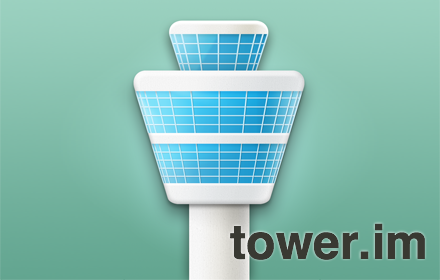
<style>
.page{position:relative;width:440px;height:280px}
.page>*{position:absolute;margin:0}
.t1{font:48px "Helvetica-Bold";color:#393932}
</style>
<div class="page">
<p class="t1" style="left:230px;top:223px;width:195px;height:37px">tower.im</p>
</div>
